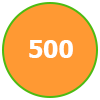
<style>
.page{position:relative;width:100px;height:100px;background:#ff9933}
.page>*{position:absolute;margin:0}
.t1{font:24px "Tahoma-Bold";color:#ffffff}
</style>
<div class="page">
<p class="t1" style="left:29px;top:40px;width:44px;height:18px">500</p>
</div>
